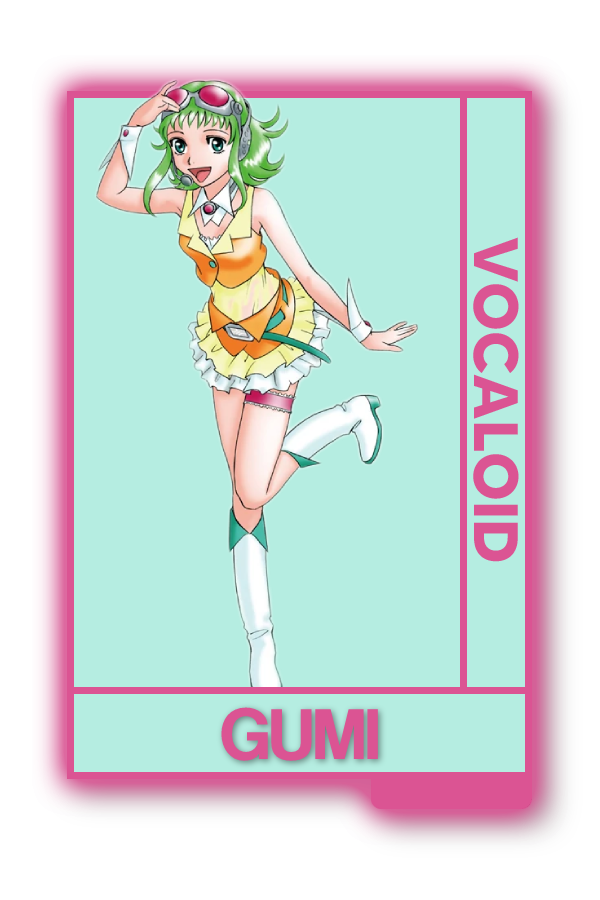
<style>
.page{position:relative;width:600px;height:900px;background:#b5ede1}
.page>*{position:absolute;margin:0}
.t1{font:62.5px "MADETOMMY-Bold";color:#db5493}
.t2{font:75px "CoolveticaRg-Regular";color:#db5493}
</style>
<div class="page">
<p class="t1" style="left:473px;top:237px;width:46px;height:325px;rotate:90deg">VOCALOID</p>
<p class="t2" style="left:221px;top:707px;width:157px;height:54px">GUMI</p>
</div>
